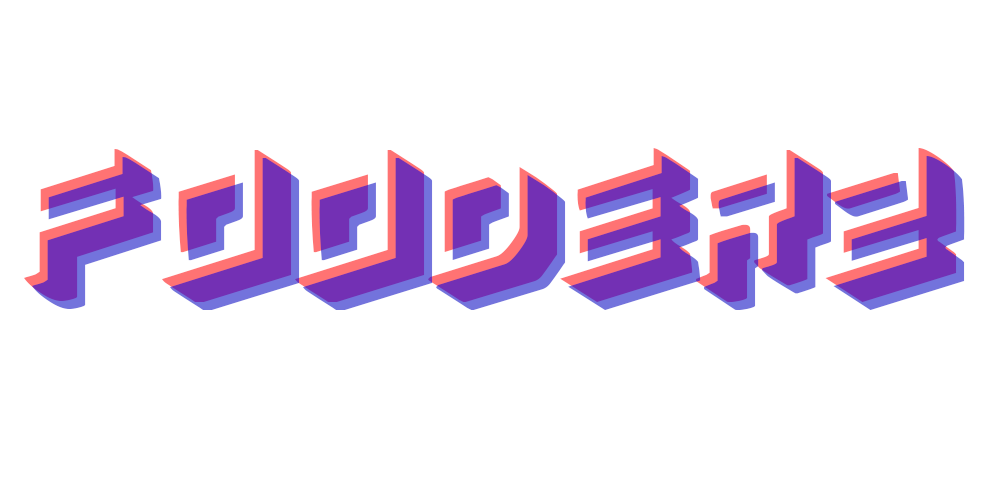
<style>
.page{position:relative;width:1000px;height:500px;background:#ffffff}
.page>*{position:absolute;margin:0}
.t1{font:207.8px "Simpletype"}
</style>
<div class="page">
<p class="t1" style="left:24px;top:148px;width:933px;height:154px">FoodERz</p>
<p class="t1" style="left:32px;top:156px;width:933px;height:154px">FoodERz</p>
</div>
